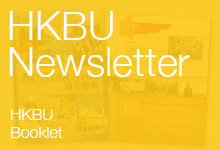
<style>
.page{position:relative;width:220px;height:150px}
.page>*{position:absolute;margin:0}
.t1{font:40px/36px "HelveticaNeue-Light";color:#ffffff}
.t2{font:16px/18px "HelveticaNeue-Light";color:#ffffff}
</style>
<div class="page">
<p class="t1" style="left:9px;top:11px;width:181px;height:66px">HKBU <br>Newsletter</p>
<p class="t2" style="left:11px;top:109px;width:52px;height:29px">HKBU<br>Booklet</p>
</div>
